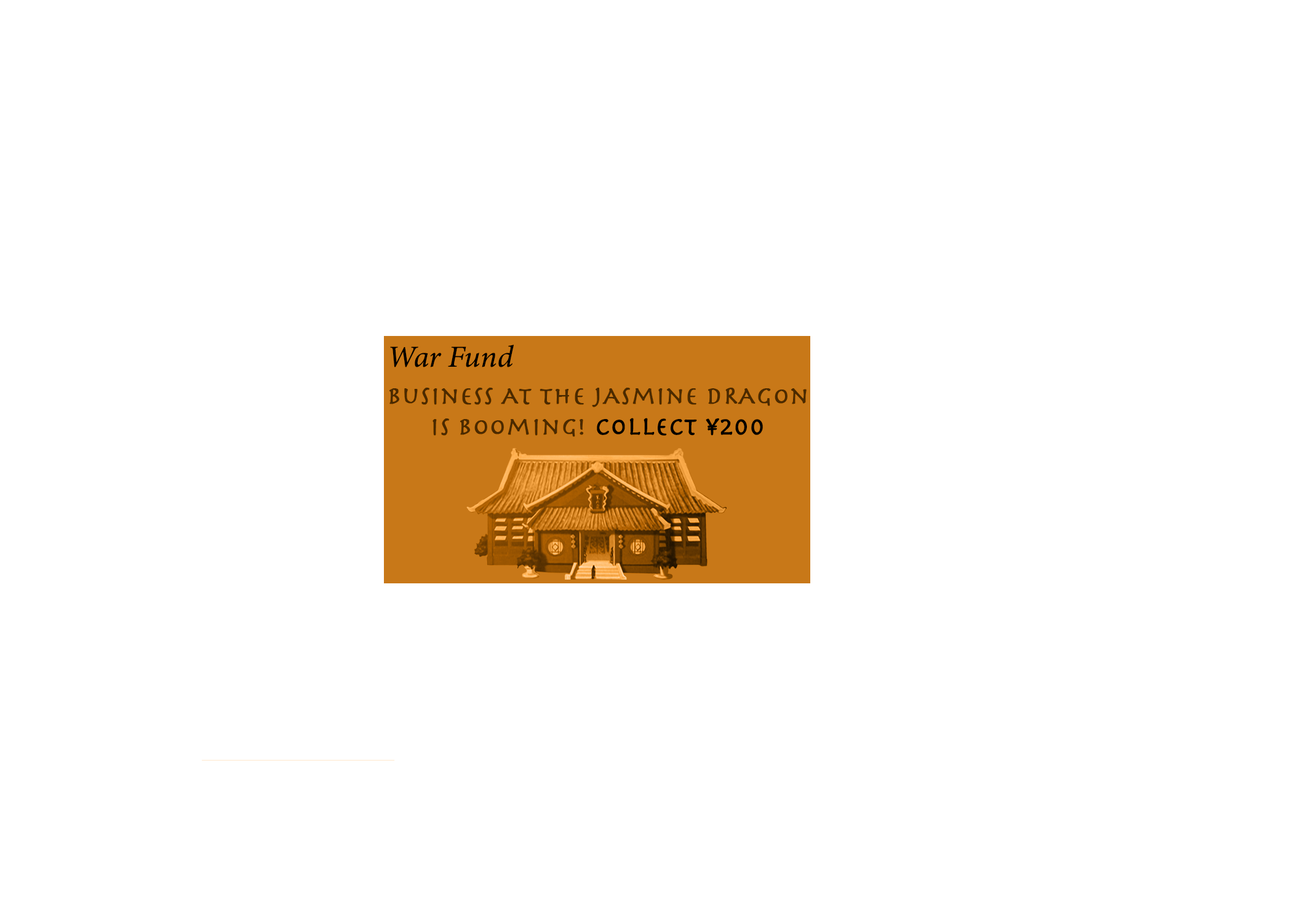
<style>
.page{position:relative;width:1292px;height:923px;background:#ffffff}
.page>*{position:absolute;margin:0}
.t1{font:30.8px "MinionConceptItalic-MediumItalic";color:#000000;font-weight:bold}
.t2{font:25.6px "Herculanum";color:#4d310e;font-weight:bold}
.t3{font:25.6px "Herculanum";color:#000000;font-weight:bold}
</style>
<div class="page">
<p class="t1" style="left:390px;top:345px;width:124px;height:22px">War Fund</p>
<p class="t2" style="left:389px;top:388px;width:418px;height:49px;text-align:center">business At the jAsmine dRAgon<br>is booming!</p>
<p class="t3" style="left:597px;top:418px;width:166px;height:18px"><span class="t2"> <br>                     </span>collect ¥200</p>
</div>
